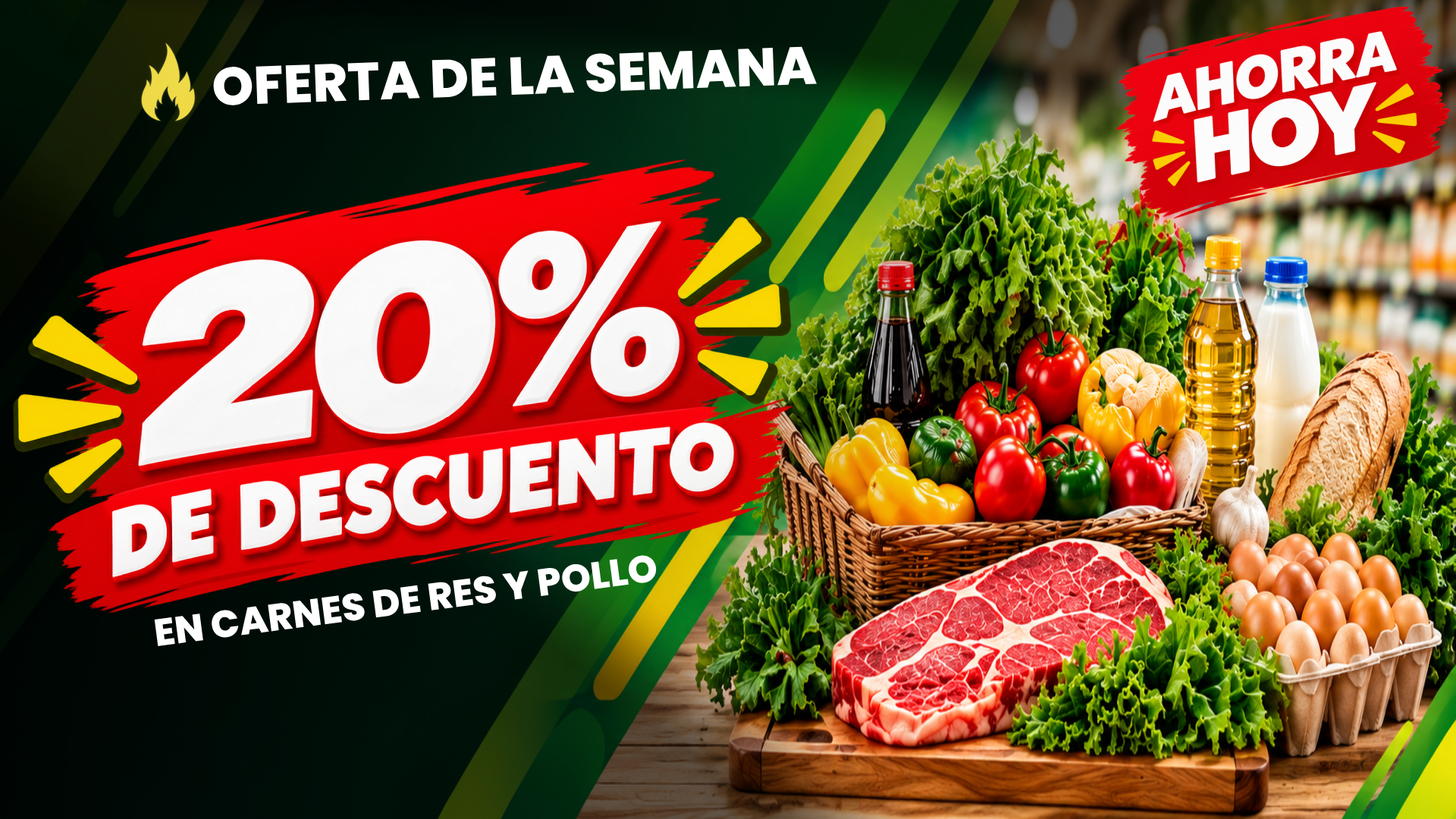
<style>
.page{position:relative;width:1456px;height:819px}
.page>*{position:absolute;margin:0}
.t1{font:53.1px "Poppins-ExtraBold";color:#ffffff}
.t2{font:37.9px "Poppins-ExtraBold";color:#ffffff}
</style>
<div class="page">
<p class="t1" style="left:213px;top:46px;width:604px;height:60px;rotate:-2deg">OFERTA DE LA SEMANA</p>
<p class="t2" style="left:154px;top:554px;width:503px;height:92px;rotate:-7deg">EN CARNES DE RES Y POLLO</p>
</div>
